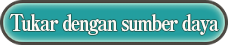
<style>
.page{position:relative;width:228px;height:45px}
.page>*{position:absolute;margin:0}
.t1{font:23px "RyuminPro-ExBold";letter-spacing:-0.08em;color:#ffffff;scale:0.81 1}
</style>
<div class="page">
<p class="t1" style="left:9px;top:14px;width:210px;height:21px">Tukar dengan sumber daya</p>
</div>
